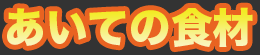
<style>
.page{position:relative;width:260px;height:55px;background:#e96321}
.page>*{position:absolute;margin:0}
.t1{font:41.7px "HiraKakuStdN-W8"}
</style>
<div class="page">
<p class="t1" style="left:7px;top:7px;width:246px;height:41px">あいての食材</p>
</div>
